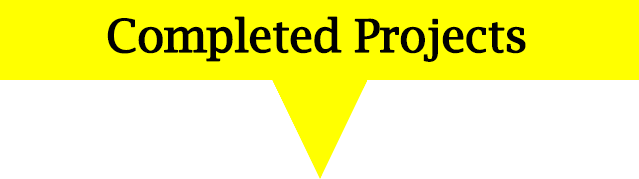
<style>
.page{position:relative;width:639px;height:179px;background:#ffffff}
.page>*{position:absolute;margin:0}
.t1{font:45px "LucidaBright";letter-spacing:-0.035em;color:#000000;font-weight:bold}
</style>
<div class="page">
<p class="t1" style="left:107px;top:16px;width:419px;height:46px">Completed Projects</p>
</div>
